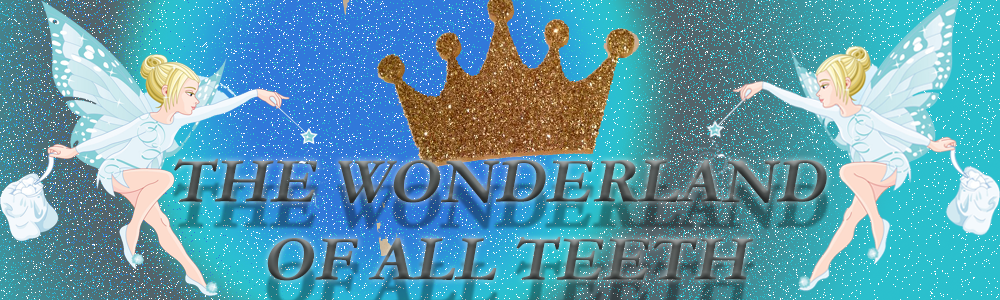
<style>
.page{position:relative;width:1000px;height:300px}
.page>*{position:absolute;margin:0}
.t1{font:65px "Garamond-Bold";text-transform:uppercase;font-style:italic}
</style>
<div class="page">
<p class="t1" style="left:174px;top:158px;width:653px;height:123px;text-align:center">The Wonderland<br> of all teeth</p>
</div>
